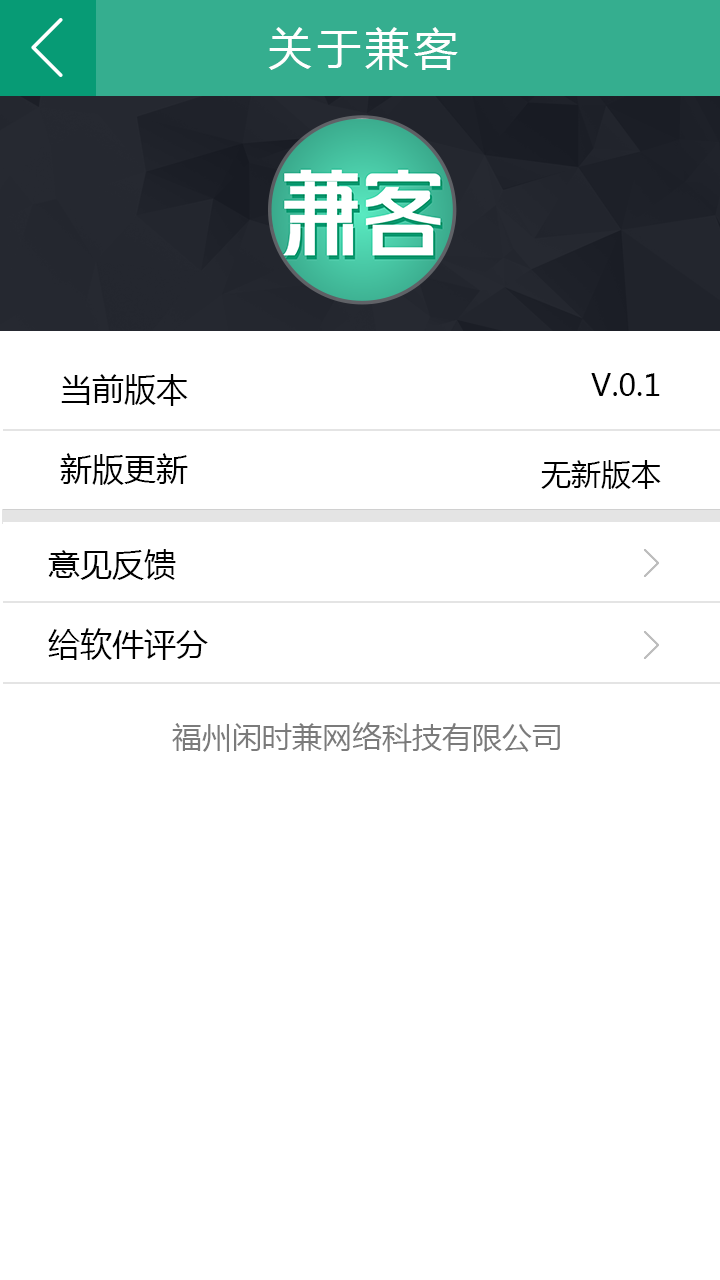
<style>
.page{position:relative;width:720px;height:1280px;background:#ffffff}
.page>*{position:absolute;margin:0}
.t1{font:44px "MicrosoftYaHei";letter-spacing:0.1em;color:#ffffff}
.t2{font:32px/80px "MicrosoftYaHei";color:#000000}
.t3{font:30px "MicrosoftYaHei";color:#000000}
.t4{font:30px "MicrosoftYaHei";color:#7b7b7b}
</style>
<div class="page">
<p class="t1" style="left:268px;top:27px;width:190px;height:43px">关于兼客</p>
<p class="t2" style="left:60px;top:374px;width:128px;height:111px">当前版本<br>新版更新</p>
<p class="t3" style="left:591px;top:373px;width:69px;height:23px">V.0.1</p>
<p class="t3" style="left:541px;top:460px;width:120px;height:29px">无新版本</p>
<p class="t2" style="left:48px;top:549px;width:160px;height:111px">意见反馈<br>给软件评分</p>
<p class="t4" style="left:172px;top:722px;width:388px;height:30px">福州闲时兼网络科技有限公司</p>
</div>
